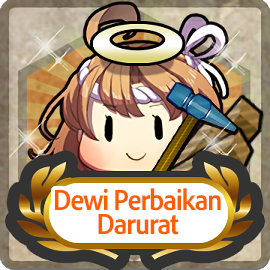
<style>
.page{position:relative;width:270px;height:270px}
.page>*{position:absolute;margin:0}
.t1{font:30px/24px "AdobeClean-Bold";letter-spacing:-0.04em;color:#ff5d00;scale:0.9 1}
</style>
<div class="page">
<p class="t1" style="left:55px;top:188px;width:166px;height:47px;text-align:center">Dewi Perbaikan<br>Darurat</p>
</div>
